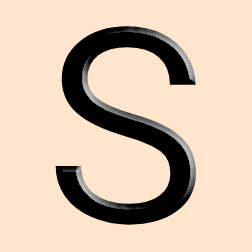
<style>
.page{position:relative;width:252px;height:252px;background:#fee5cb}
.page>*{position:absolute;margin:0}
.t1{font:271.6px "Roboto-Regular";color:#000000}
</style>
<div class="page">
<p class="t1" style="left:55px;top:26px;width:141px;height:199px">S</p>
</div>
